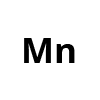
<style>
.page{position:relative;width:100px;height:100px;background:#ffffff}
.page>*{position:absolute;margin:0}
.t1{font:35px "OpenSans-Bold";color:#000000}
</style>
<div class="page">
<p class="t1" style="left:24px;top:38px;width:51px;height:25px">Mn</p>
</div>
